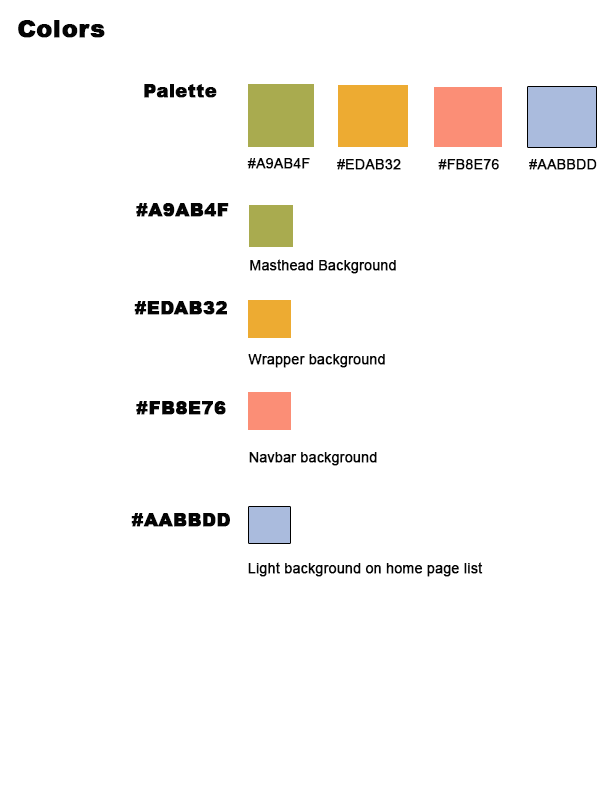
<style>
.page{position:relative;width:612px;height:792px;background:#ffffff}
.page>*{position:absolute;margin:0}
.t1{font:24px "Arial-Black";color:#040404;font-weight:bold}
.t2{font:18px "Arial-Black";color:#040404;font-weight:bold}
.t3{font:14px "ArialMT";color:#040404;font-weight:bold}
</style>
<div class="page">
<p class="t1" style="left:18px;top:20px;width:87px;height:18px">Colors</p>
<p class="t2" style="left:144px;top:84px;width:73px;height:14px">Palette</p>
<p class="t3" style="left:247px;top:158px;width:63px;height:11px">#A9AB4F</p>
<p class="t3" style="left:337px;top:159px;width:64px;height:11px">#EDAB32</p>
<p class="t3" style="left:438px;top:159px;width:61px;height:11px">#FB8E76</p>
<p class="t3" style="left:529px;top:159px;width:68px;height:11px">#AABBDD</p>
<p class="t2" style="left:136px;top:203px;width:93px;height:14px">#A9AB4F</p>
<p class="t3" style="left:250px;top:259px;width:146px;height:15px">Masthead Background</p>
<p class="t2" style="left:134px;top:301px;width:93px;height:14px">#EDAB32</p>
<p class="t3" style="left:248px;top:354px;width:137px;height:14px">Wrapper background</p>
<p class="t2" style="left:136px;top:401px;width:90px;height:14px">#FB8E76</p>
<p class="t3" style="left:249px;top:452px;width:128px;height:14px">Navbar background</p>
<p class="t2" style="left:131px;top:513px;width:99px;height:14px">#AABBDD</p>
<p class="t3" style="left:248px;top:562px;width:235px;height:15px">Light background on home page list</p>
</div>
